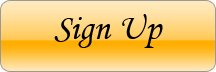
<style>
.page{position:relative;width:216px;height:72px}
.page>*{position:absolute;margin:0}
.t1{font:36px "MonotypeCorsiva";color:#000000}
</style>
<div class="page">
<p class="t1" style="left:54px;top:14px;width:109px;height:34px">Sign Up</p>
</div>
